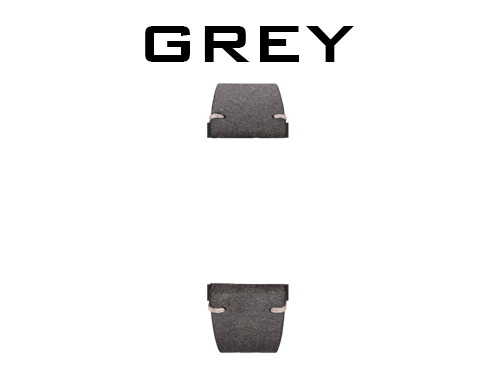
<style>
.page{position:relative;width:480px;height:380px;background:#ffffff}
.page>*{position:absolute;margin:0}
.t1{font:85px "BankGothicBT-Medium";color:#000000}
</style>
<div class="page">
<p class="t1" style="left:145px;top:26px;width:209px;height:36px">grey</p>
</div>
